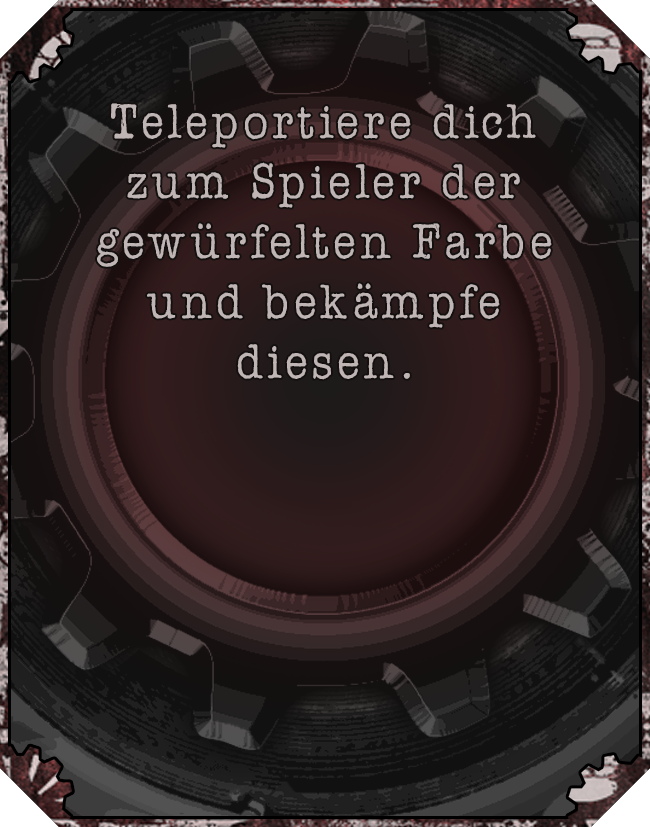
<style>
.page{position:relative;width:650px;height:827px}
.page>*{position:absolute;margin:0}
.t1{font:50px "AmerTypewriterITCbyBT-Medium";letter-spacing:0.02em;color:#c0b5b5}
</style>
<div class="page">
<p class="t1" style="left:97px;top:103px;width:455px;height:277px;text-align:center">Teleportiere dich zum Spieler der gewürfelten Farbe und bekämpfe diesen.</p>
</div>
